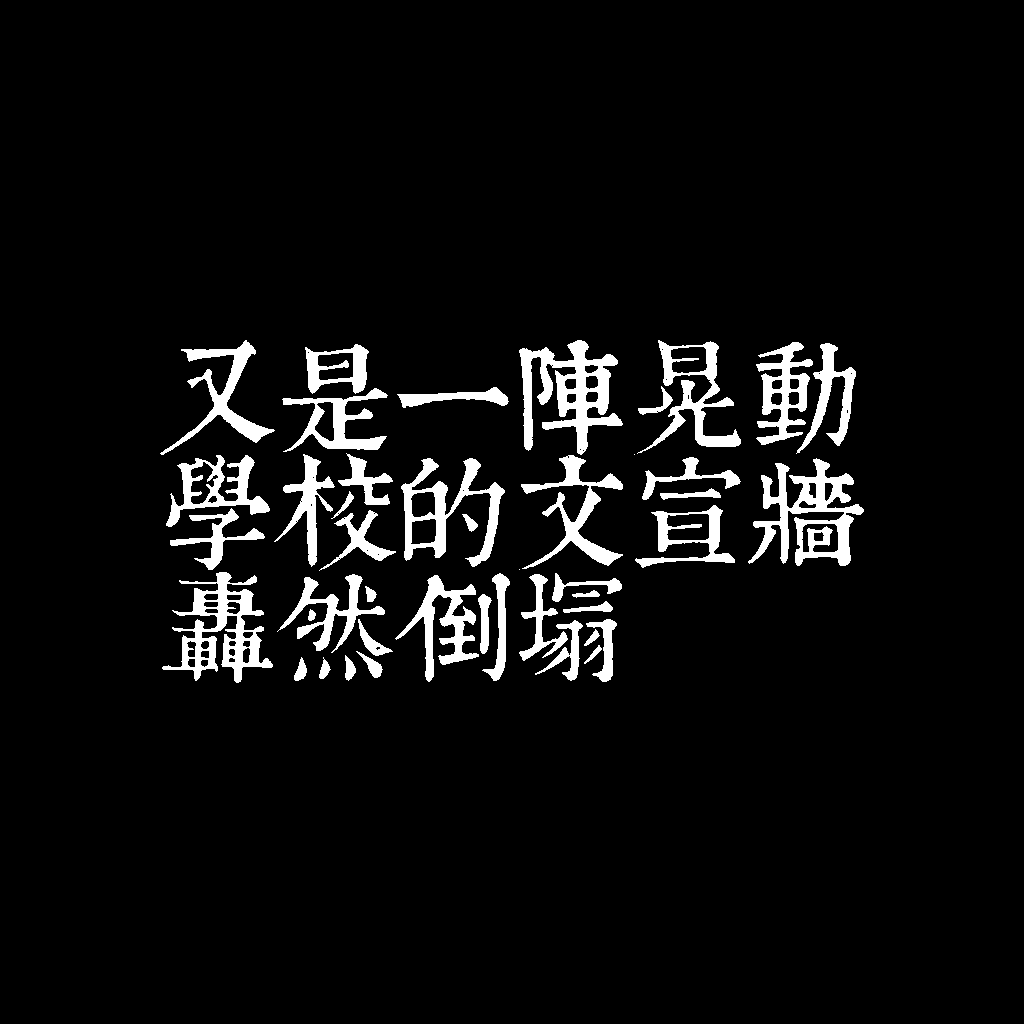
<style>
.page{position:relative;width:1024px;height:1024px;background:#000000}
.page>*{position:absolute;margin:0}
.t1{font:120px/115px "TpldKhangXiDictTrial";letter-spacing:-0.02em;color:#ffffff}
</style>
<div class="page">
<p class="t1" style="left:160px;top:340px;width:704px;height:343px">又是一陣晃動<br>學校的文宣牆<br>轟然倒塌</p>
</div>
